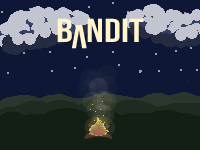
<style>
.page{position:relative;width:200px;height:150px;background:#0e1735}
.page>*{position:absolute;margin:0}
.t1{font:33.3px "BebasNeue-Regular";color:#fff5c9;scale:1.25 1}
</style>
<div class="page">
<p class="t1" style="left:57px;top:18px;width:87px;height:24px">b  ndit</p>
</div>
